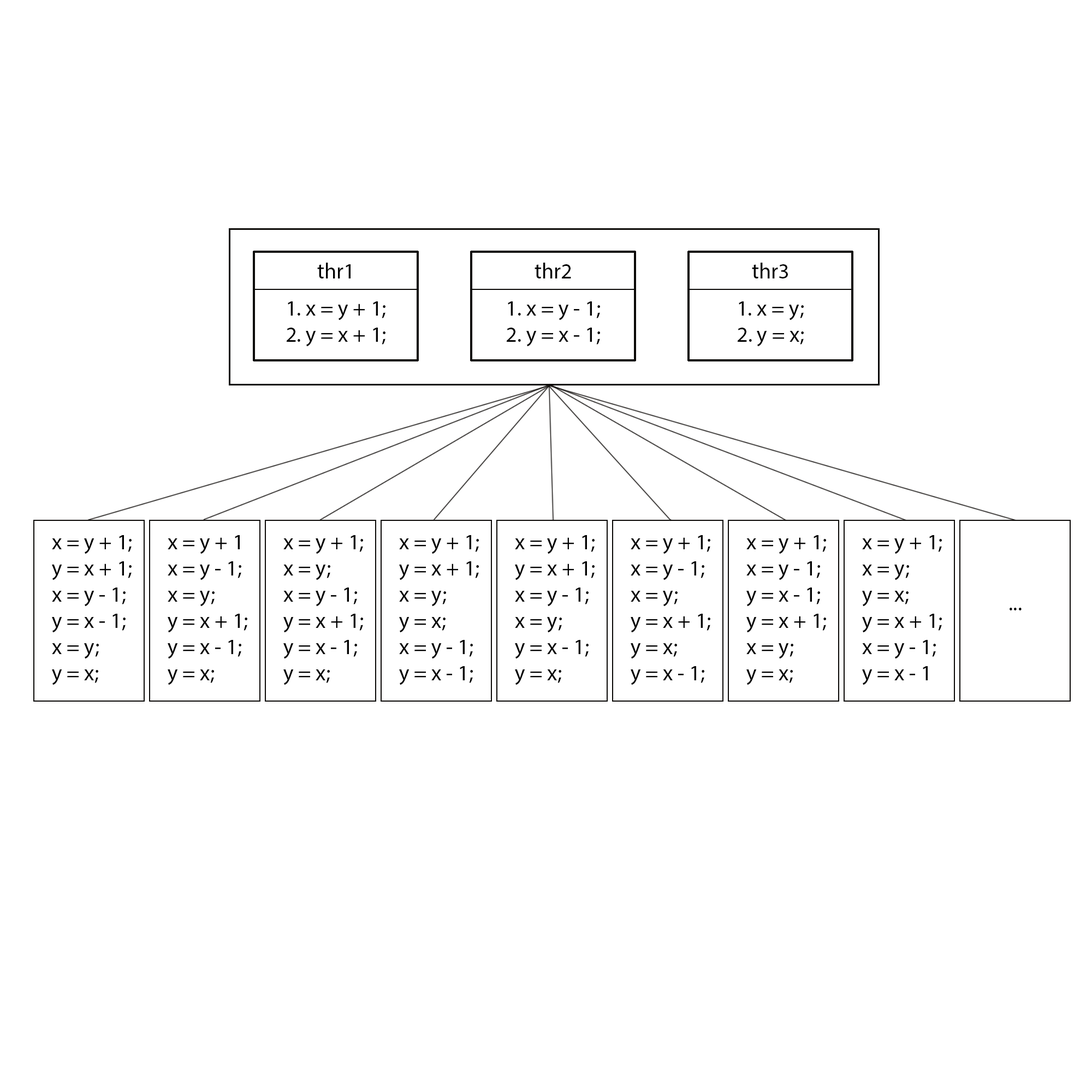
<style>
.page{position:relative;width:1092px;height:1092px;background:#ffffff}
.page>*{position:absolute;margin:0}
.t1{font:21.8px "MyriadPro-Regular";color:#000000}
</style>
<div class="page">
<p class="t1" style="left:317px;top:263px;width:34px;height:15px">thr1</p>
<p class="t1" style="left:535px;top:263px;width:36px;height:15px">thr2</p>
<p class="t1" style="left:752px;top:263px;width:36px;height:15px">thr3</p>
<p class="t1" style="left:287px;top:301px;width:98px;height:46px;text-align:center">1. x = y + 1;<br>2. y = x + 1;</p>
<p class="t1" style="left:507px;top:301px;width:93px;height:46px;text-align:center">1. x = y - 1;<br>2. y = x - 1;</p>
<p class="t1" style="left:738px;top:301px;width:66px;height:46px;text-align:center">1. x = y;<br>2. y = x;</p>
<p class="t1" style="left:52px;top:535px;width:80px;height:150px">x = y + 1;<br>y = x + 1;<br>x = y - 1;<br>y = x - 1;<br>x = y;<br>y = x;</p>
<p class="t1" style="left:168px;top:535px;width:79px;height:150px">x = y + 1<br>x = y - 1;<br>x = y;<br>y = x + 1;<br>y = x - 1;<br>y = x;</p>
<p class="t1" style="left:283px;top:535px;width:80px;height:150px">x = y + 1;<br>x = y;<br>x = y - 1;<br>y = x + 1;<br>y = x - 1;<br>y = x;</p>
<p class="t1" style="left:399px;top:535px;width:80px;height:150px">x = y + 1;<br>y = x + 1;<br>x = y;<br>y = x;<br>x = y - 1;<br>y = x - 1;</p>
<p class="t1" style="left:515px;top:535px;width:80px;height:150px">x = y + 1;<br>y = x + 1;<br>x = y - 1;<br>x = y;<br>y = x - 1;<br>y = x;</p>
<p class="t1" style="left:631px;top:535px;width:79px;height:150px">x = y + 1;<br>x = y - 1;<br>x = y;<br>y = x + 1;<br>y = x;<br>y = x - 1;</p>
<p class="t1" style="left:746px;top:535px;width:80px;height:150px">x = y + 1;<br>x = y - 1;<br>y = x - 1;<br>y = x + 1;<br>x = y;<br>y = x;</p>
<p class="t1" style="left:862px;top:535px;width:80px;height:150px">x = y + 1;<br>x = y;<br>y = x;<br>y = x + 1;<br>x = y - 1;<br>y = x - 1</p>
<p class="t1" style="left:1010px;top:608px;width:12px;height:2px">...</p>
</div>
